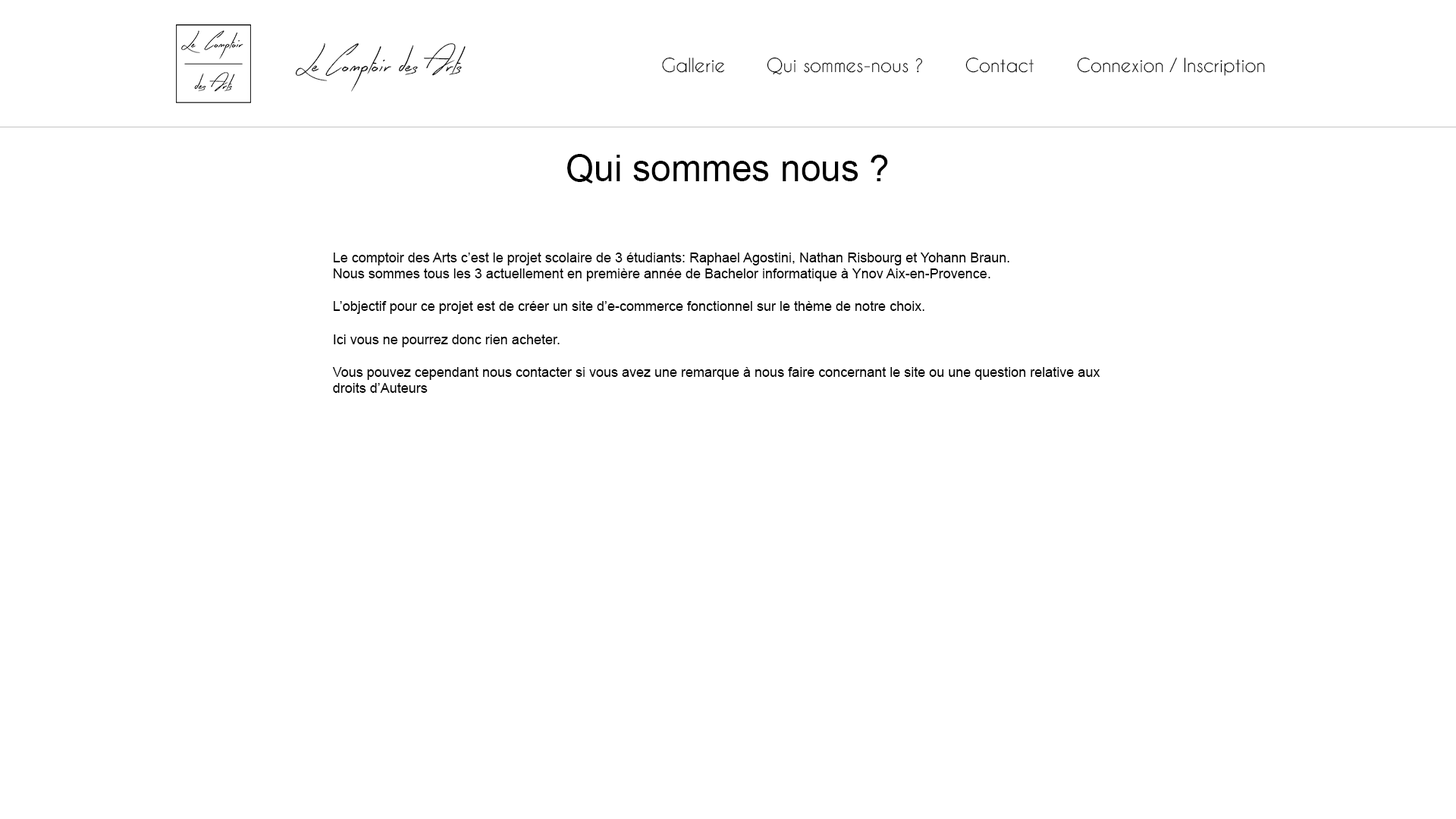
<style>
.page{position:relative;width:1456px;height:819px;background:#ffffff}
.page>*{position:absolute;margin:0}
.t1{font:33.4px "EarlyBird";color:#000000}
.t2{font:18.2px "CaviarDreams";color:#000000}
.t3{font:36.4px "ArialMT";color:#000000}
.t4{font:13.6px "ArialMT";color:#000000}
</style>
<div class="page">
<p class="t1" style="left:295px;top:43px;width:171px;height:49px">Le Comptoir des Arts</p>
<p class="t2" style="left:662px;top:57px;width:63px;height:16px">Gallerie</p>
<p class="t2" style="left:767px;top:57px;width:156px;height:18px">Qui sommes-nous ?</p>
<p class="t2" style="left:965px;top:57px;width:69px;height:16px">Contact</p>
<p class="t2" style="left:1077px;top:57px;width:188px;height:19px">Connexion / Inscription</p>
<p class="t3" style="left:567px;top:154px;width:321px;height:30px">Qui sommes nous ?</p>
<p class="t4" style="left:332px;top:253px;width:768px;height:140px">Le comptoir des Arts c’est le projet scolaire de 3 étudiants: Raphael Agostini, Nathan Risbourg et Yohann Braun.<br>Nous sommes tous les 3 actuellement en première année de Bachelor informatique à Ynov Aix-en-Provence.<br><br>L’objectif pour ce projet est de créer un site d’e-commerce fonctionnel sur le thème de notre choix.<br><br>Ici vous ne pourrez donc rien acheter.<br><br>Vous pouvez cependant nous contacter si vous avez une remarque à nous faire concernant le site ou une question relative aux droits d’Auteurs</p>
</div>
